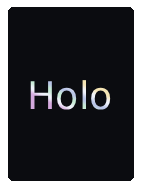
<style>
.page{position:relative;width:142px;height:190px;background:#0b0c10}
.page>*{position:absolute;margin:0}
.t1{font:38px "UniwarsSb-Regular"}
</style>
<div class="page">
<p class="t1" style="left:30px;top:80px;width:81px;height:30px">Holo</p>
</div>
